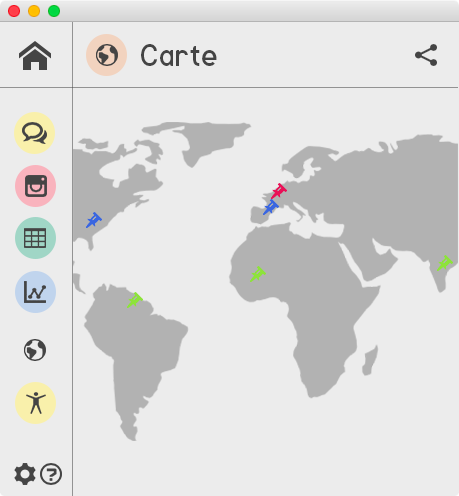
<style>
.page{position:relative;width:459px;height:496px;background:#ececec}
.page>*{position:absolute;margin:0}
.t1{font:30px "Mockup-Regular";color:#444444}
</style>
<div class="page">
<p class="t1" style="left:141px;top:44px;width:76px;height:22px">Carte</p>
</div>
